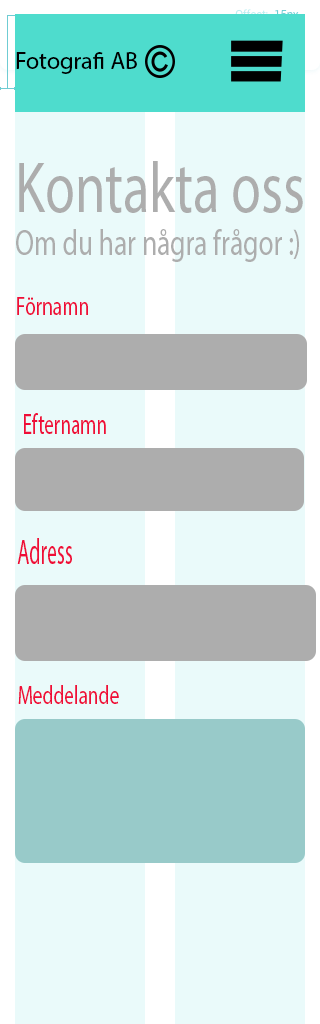
<style>
.page{position:relative;width:320px;height:1024px;background:#eafafa}
.page>*{position:absolute;margin:0}
.t1{font:24px "MyriadPro-Regular";color:#000000}
.t2{font:36px "MyriadPro-Regular";color:#adadad;scale:0.76 1}
.t3{font:72px "MyriadPro-Regular";color:#adadad;scale:0.76 1}
.t4{font:26.1px "MyriadPro-Regular";color:#ef0d38;scale:0.75 1}
.t5{font:29.2px "MyriadPro-Regular";color:#ef0d38;scale:0.66 1}
.t6{font:35.6px "MyriadPro-Regular";color:#ef0d38;scale:0.56 1}
.t7{font:26.5px "MyriadPro-Regular";color:#ef0d38;scale:0.73 1}
</style>
<div class="page">
<p class="t1" style="left:16px;top:52px;width:121px;height:22px">Fotografi AB</p>
<p class="t2" style="left:16px;top:161px;width:287px;height:101px"><span class="t3">Kontakta oss<br></span>Om du har några frågor :)</p>
<p class="t4" style="left:17px;top:297px;width:71px;height:18px">Förnamn</p>
<p class="t5" style="left:24px;top:413px;width:82px;height:21px">Efternamn</p>
<p class="t6" style="left:17px;top:538px;width:55px;height:26px">Adress</p>
<p class="t7" style="left:18px;top:685px;width:101px;height:19px">Meddelande</p>
</div>
